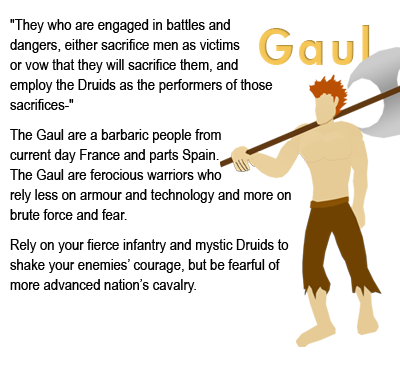
<style>
.page{position:relative;width:400px;height:380px;background:#ffffff}
.page>*{position:absolute;margin:0}
.t1{font:16px/20px "ArialNarrow";color:#000000}
.t2{font:48px "FuturaHv";letter-spacing:0.1em;color:#f5c655}
</style>
<div class="page">
<p class="t1" style="left:10px;top:19px;width:281px;height:274px">"They who are engaged in battles and<br>dangers, either sacrifice men as victims<br>or vow that they will sacrifice them, and<br>employ the Druids as the performers of those sacrifices-"<br><br>The Gaul are a barbaric people from<br>current day France and parts Spain.<br>The Gaul are ferocious warriors who<br>rely less on armour and technology and more on brute force and fear.<br><br>Rely on your fierce infantry and mystic Druids to shake your enemies’ courage, but be fearful of more advanced nation’s cavalry.</p>
<p class="t2" style="left:259px;top:25px;width:111px;height:40px">Gaul</p>
</div>
